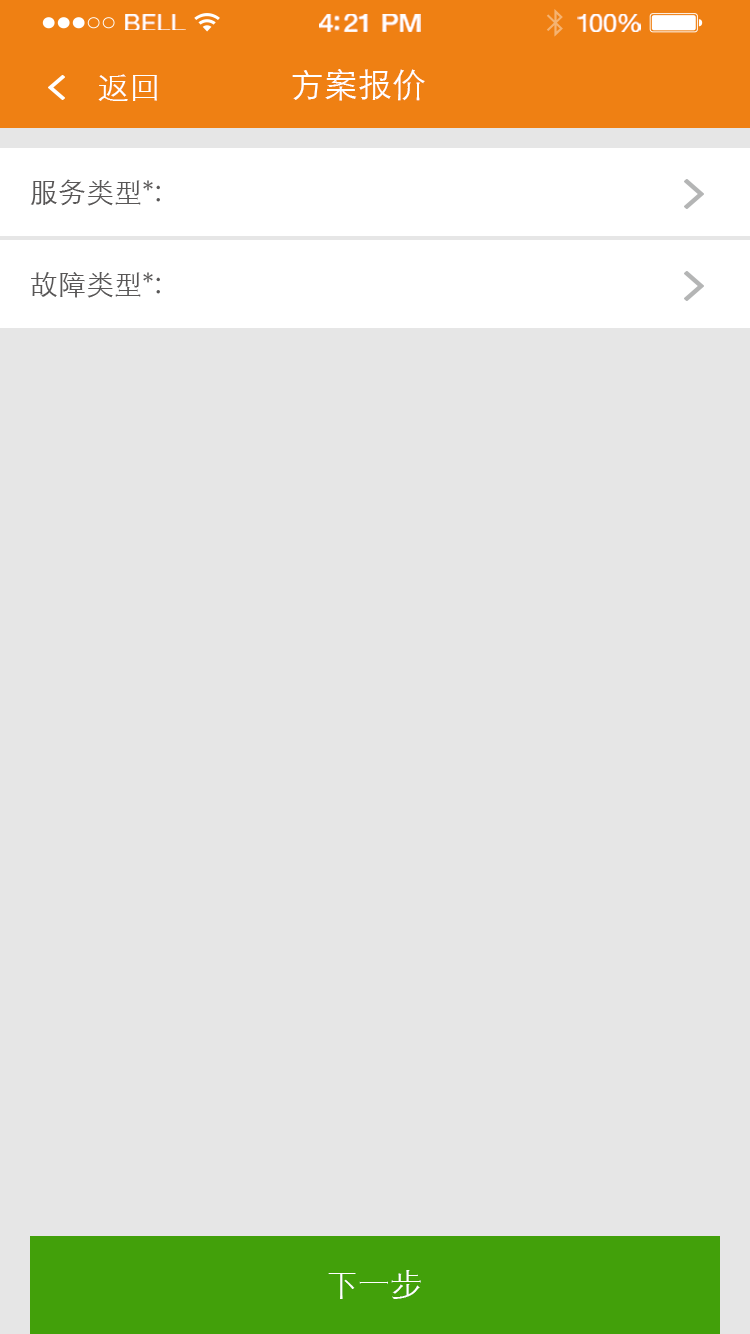
<style>
.page{position:relative;width:750px;height:1334px;background:#e6e6e6}
.page>*{position:absolute;margin:0}
.t1{font:23.3px "HelveticaNeue";letter-spacing:0.02em;color:#ffffff;scale:1.06 1}
.t2{font:25.3px "HelveticaNeue-Medium";letter-spacing:-0.02em;color:#ffffff;scale:1.06 1}
.t3{font:24.3px "HelveticaNeue";letter-spacing:-0.02em;color:#ffffff;scale:1.06 1}
.t4{font:32px "STXihei";color:#ffffff}
.t5{font:34px "STXihei";color:#ffffff}
.t6{font:28px "STXihei";color:#595757}
</style>
<div class="page">
<p class="t1" style="left:125px;top:14px;width:61px;height:16px">BELL</p>
<p class="t2" style="left:319px;top:14px;width:102px;height:18px">4:21 PM</p>
<p class="t3" style="left:577px;top:14px;width:64px;height:18px">100%</p>
<p class="t4" style="left:98px;top:74px;width:59px;height:27px">返回</p>
<p class="t5" style="left:292px;top:69px;width:133px;height:32px">方案报价</p>
<p class="t6" style="left:30px;top:179px;width:130px;height:27px">服务类型*:</p>
<p class="t6" style="left:31px;top:272px;width:129px;height:26px">故障类型*:</p>
<p class="t4" style="left:328px;top:1270px;width:93px;height:29px">下一步</p>
</div>
